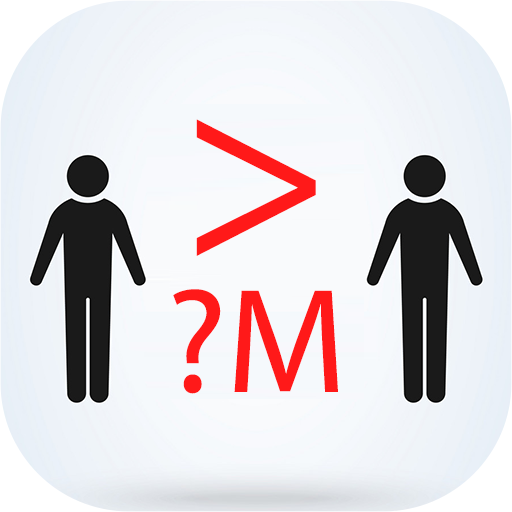
<style>
.page{position:relative;width:512px;height:512px}
.page>*{position:absolute;margin:0}
.t1{font:256px "MyriadPro-Regular";letter-spacing:-0.005em;color:#ff1919;text-transform:uppercase}
.t2{font:150px "MyriadPro-Regular";letter-spacing:-0.005em;color:#ff1919;text-transform:uppercase}
</style>
<div class="page">
<p class="t1" style="left:196px;top:119px;width:120px;height:137px">&gt;</p>
<p class="t2" style="left:173px;top:289px;width:165px;height:105px">?M</p>
</div>
